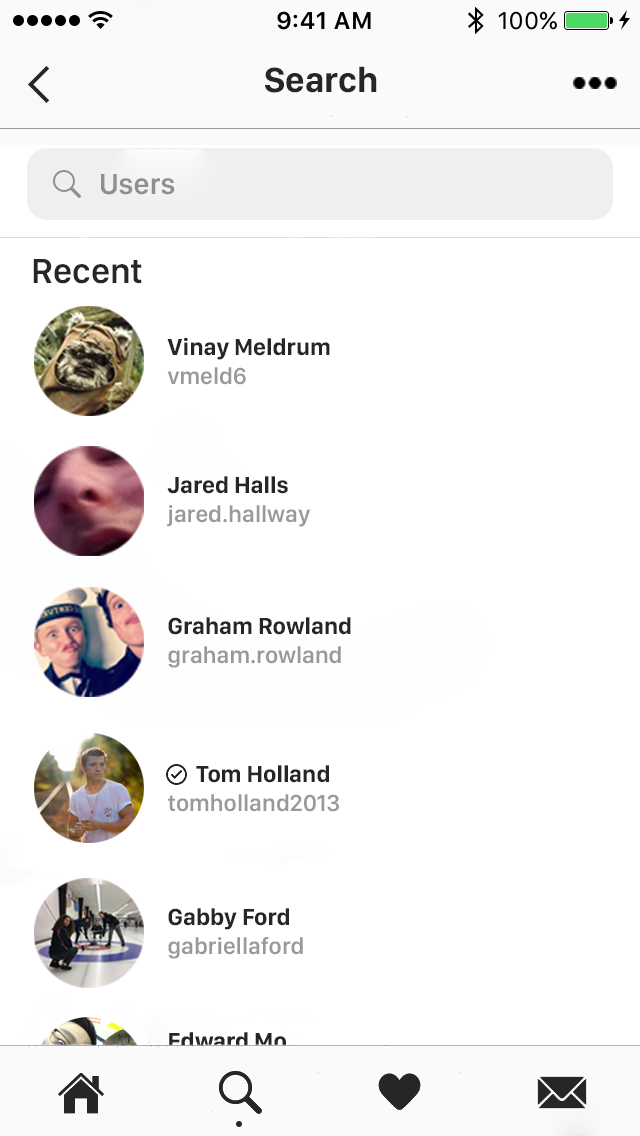
<style>
.page{position:relative;width:640px;height:1136px;background:#ffffff}
.page>*{position:absolute;margin:0}
.t1{font:36px "SanFranciscoDisplay-Bold";color:#262626}
.t2{font:30px "SanFranciscoDisplay-Semibold";color:#8e8e93}
.t3{font:36px "SanFranciscoDisplay-Semibold";color:#262626}
.t4{font:24px "SanFranciscoDisplay-Bold";color:#262626}
.t5{font:24px "SanFranciscoDisplay-Semibold";color:#999999}
</style>
<div class="page">
<p class="t1" style="left:265px;top:66px;width:112px;height:27px">Search</p>
<p class="t2" style="left:101px;top:174px;width:74px;height:21px">Users</p>
<p class="t3" style="left:33px;top:259px;width:109px;height:25px">Recent</p>
<p class="t4" style="left:167px;top:337px;width:163px;height:48px">Vinay Meldrum<br><span class="t5">vmeld6</span></p>
<p class="t5" style="left:167px;top:476px;width:144px;height:51px"><span class="t4">Jared Halls<br></span>jared.hallway</p>
<p class="t4" style="left:168px;top:617px;width:183px;height:51px">Graham Rowland<br><span class="t5">graham.rowland</span></p>
<p class="t5" style="left:168px;top:765px;width:171px;height:47px"><span class="t4">      Tom Holland<br></span>tomholland2013</p>
<p class="t5" style="left:168px;top:908px;width:135px;height:51px"><span class="t4">Gabby Ford<br></span>gabriellaford</p>
</div>
